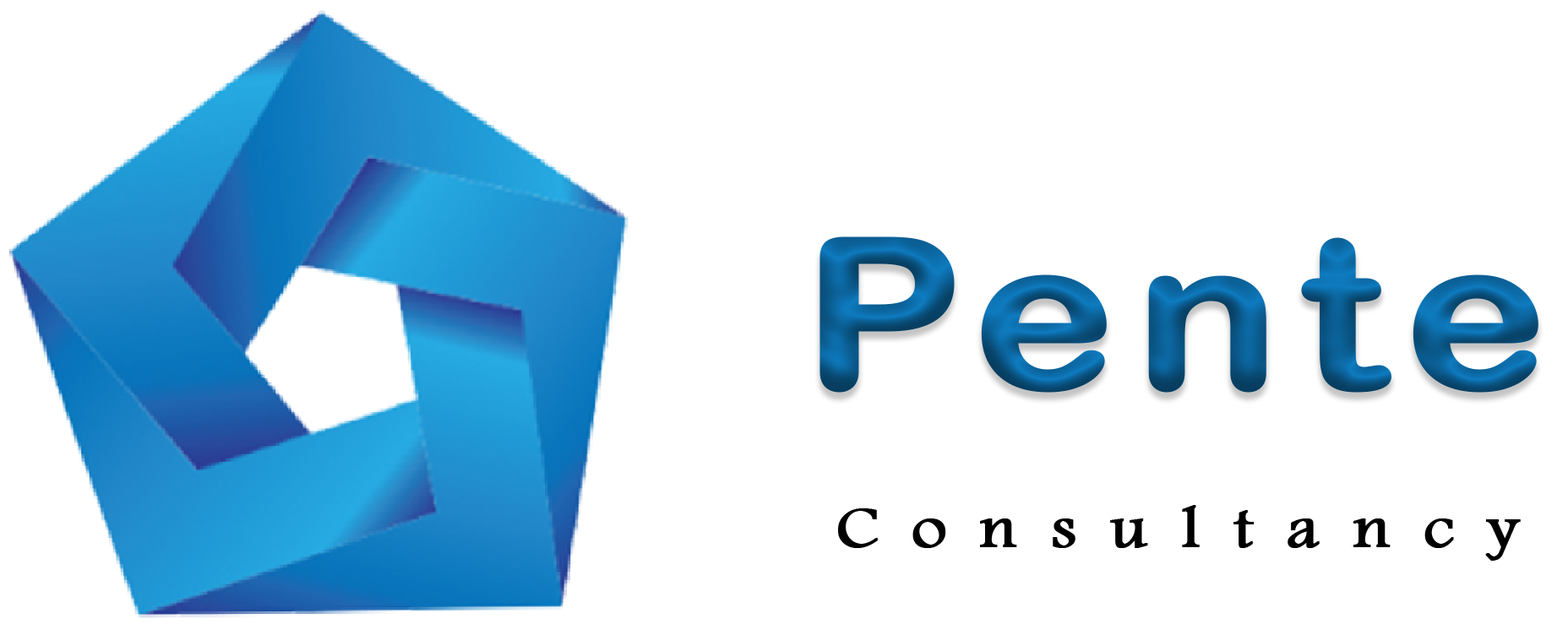
<style>
.page{position:relative;width:1568px;height:635px;background:#ffffff}
.page>*{position:absolute;margin:0}
.t1{font:208.1px "ArialRoundedMTBold";letter-spacing:0.06em;font-weight:bold;scale:1.14 1}
.t2{font:60.2px "FootlightMTLight";letter-spacing:0.46em;color:#000000;font-weight:bold;scale:1.14 1}
</style>
<div class="page">
<p class="t1" style="left:819px;top:237px;width:719px;height:156px">Pente</p>
<p class="t2" style="left:838px;top:505px;width:683px;height:56px">Consultancy</p>
</div>
